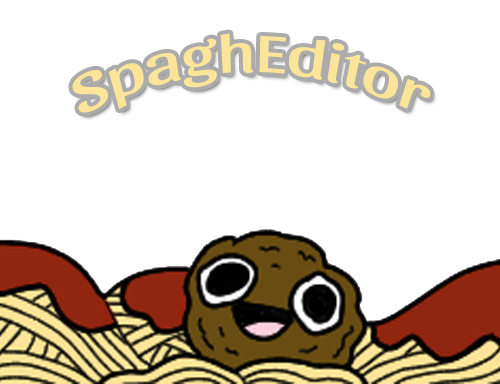
<style>
.page{position:relative;width:500px;height:384px;background:#ffffff}
.page>*{position:absolute;margin:0}
.t1{font:54.2px "Sansita-Regular";letter-spacing:0.01em;color:#fce598;scale:0.83 1}
</style>
<div class="page">
<p class="t1" style="left:72px;top:33px;width:359px;height:80px">SpaghEditor</p>
</div>
